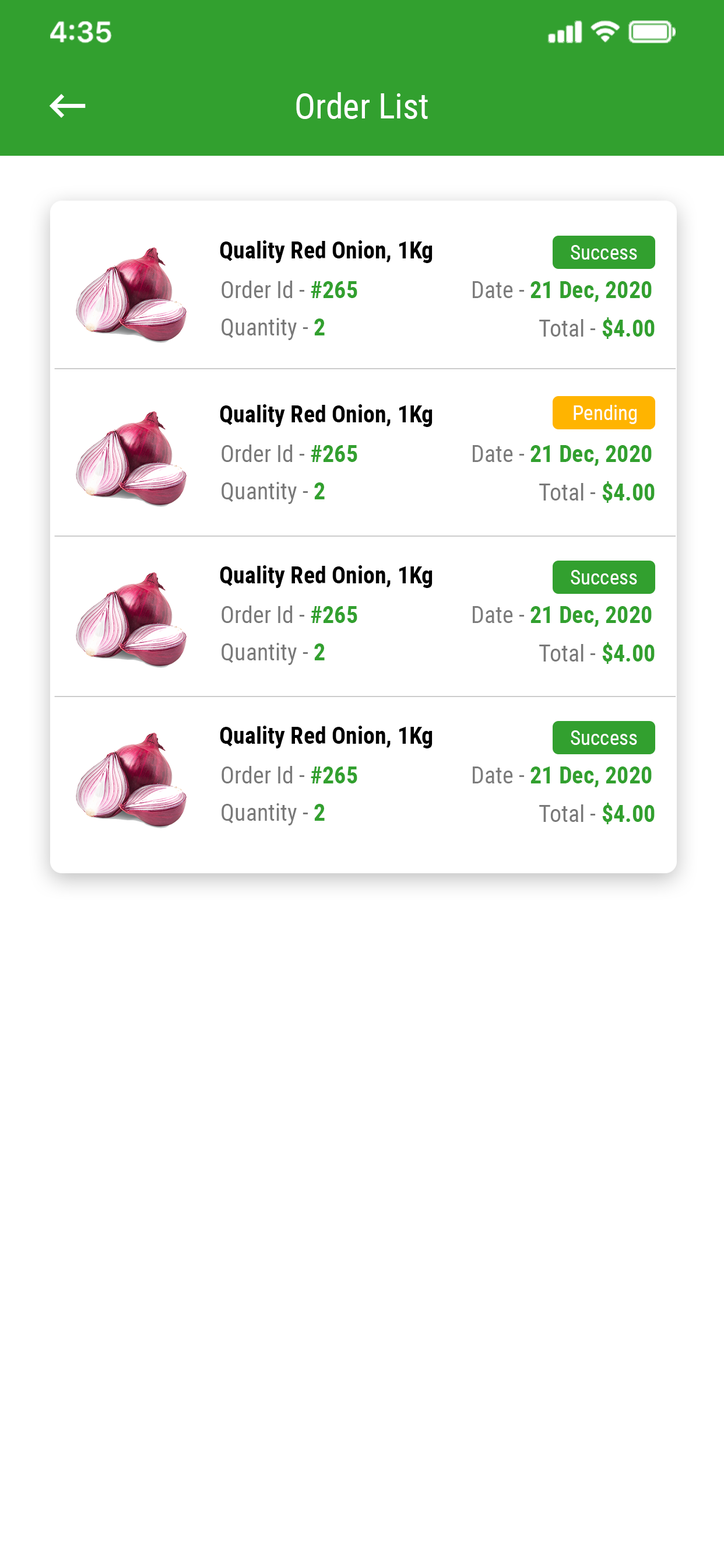
<style>
.page{position:relative;width:724px;height:1568px;background:#ffffff}
.page>*{position:absolute;margin:0}
.t1{font:35px "RobotoCondensed-Regular";color:#ffffff}
.t2{font:23.3px "RobotoCondensed-Bold";color:#000000}
.t3{font:20.4px "RobotoCondensed-Regular";color:#ffffff}
.t4{font:23.3px "RobotoCondensed-Regular";color:#797979}
.t5{font:23.3px "RobotoCondensed-Bold";color:#32a02f}
.t6{font:23.3px "RobotoCondensed-Regular";color:#7c7c7c}
</style>
<div class="page">
<p class="t1" style="left:296px;top:92px;width:132px;height:27px">Order List</p>
<p class="t2" style="left:220px;top:240px;width:213px;height:23px">Quality Red Onion, 1Kg</p>
<p class="t3" style="left:571px;top:245px;width:67px;height:15px">Success</p>
<p class="t4" style="left:222px;top:281px;width:136px;height:17px">Order Id - <span class="t5">#265</span></p>
<p class="t5" style="left:473px;top:281px;width:179px;height:21px"><span class="t6">Date - </span>21 Dec, 2020</p>
<p class="t4" style="left:222px;top:318px;width:103px;height:22px">Quantity - <span class="t5">2</span></p>
<p class="t4" style="left:540px;top:317px;width:115px;height:22px">Total - <span class="t5">$4.00</span></p>
<p class="t2" style="left:220px;top:404px;width:213px;height:23px">Quality Red Onion, 1Kg</p>
<p class="t3" style="left:574px;top:405px;width:63px;height:19px">Pending</p>
<p class="t4" style="left:222px;top:444px;width:136px;height:18px">Order Id - <span class="t5">#265</span></p>
<p class="t5" style="left:473px;top:445px;width:179px;height:21px"><span class="t6">Date - </span>21 Dec, 2020</p>
<p class="t4" style="left:222px;top:482px;width:103px;height:22px">Quantity - <span class="t5">2</span></p>
<p class="t4" style="left:540px;top:481px;width:115px;height:22px">Total - <span class="t5">$4.00</span></p>
<p class="t2" style="left:220px;top:565px;width:213px;height:23px">Quality Red Onion, 1Kg</p>
<p class="t3" style="left:571px;top:570px;width:67px;height:14px">Success</p>
<p class="t4" style="left:222px;top:606px;width:136px;height:17px">Order Id - <span class="t5">#265</span></p>
<p class="t5" style="left:473px;top:606px;width:179px;height:21px"><span class="t6">Date - </span>21 Dec, 2020</p>
<p class="t4" style="left:222px;top:643px;width:103px;height:22px">Quantity - <span class="t5">2</span></p>
<p class="t4" style="left:540px;top:642px;width:115px;height:22px">Total - <span class="t5">$4.00</span></p>
<p class="t2" style="left:220px;top:726px;width:213px;height:22px">Quality Red Onion, 1Kg</p>
<p class="t3" style="left:571px;top:730px;width:67px;height:15px">Success</p>
<p class="t4" style="left:222px;top:766px;width:136px;height:17px">Order Id - <span class="t5">#265</span></p>
<p class="t5" style="left:473px;top:766px;width:179px;height:22px"><span class="t6">Date - </span>21 Dec, 2020</p>
<p class="t4" style="left:222px;top:803px;width:103px;height:22px">Quantity - <span class="t5">2</span></p>
<p class="t4" style="left:540px;top:803px;width:115px;height:21px">Total - <span class="t5">$4.00</span></p>
</div>
